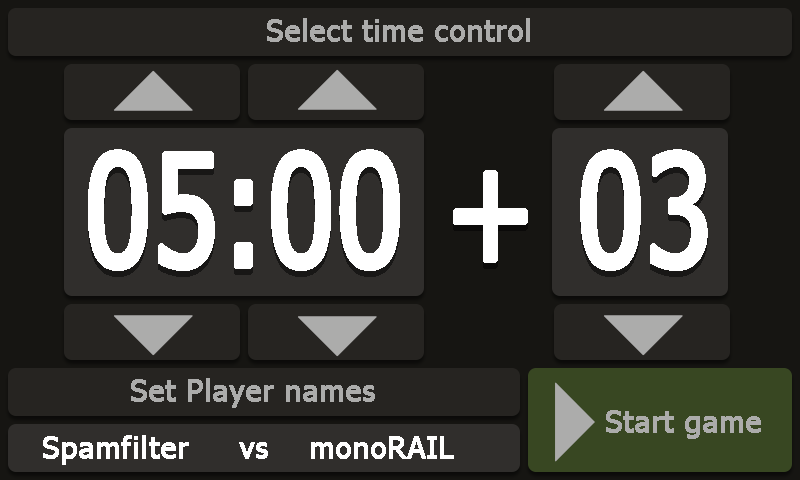
<style>
.page{position:relative;width:800px;height:480px;background:#161512}
.page>*{position:absolute;margin:0}
.t1{font:30px "Tahoma";color:#acacab;font-weight:bold}
.t2{font:156px "Tahoma";color:#ffffff;font-weight:bold;scale:0.77 1}
.t3{font:30px "Tahoma";color:#ffffff;font-weight:bold}
</style>
<div class="page">
<p class="t1" style="left:267px;top:18px;width:263px;height:24px">Select time control</p>
<p class="t2" style="left:88px;top:149px;width:620px;height:122px">05:00 + 03</p>
<p class="t1" style="left:131px;top:378px;width:244px;height:30px">Set Player names</p>
<p class="t1" style="left:606px;top:410px;width:155px;height:29px">Start game</p>
<p class="t3" style="left:43px;top:435px;width:411px;height:30px">Spamfilter     vs    monoRAIL</p>
</div>
